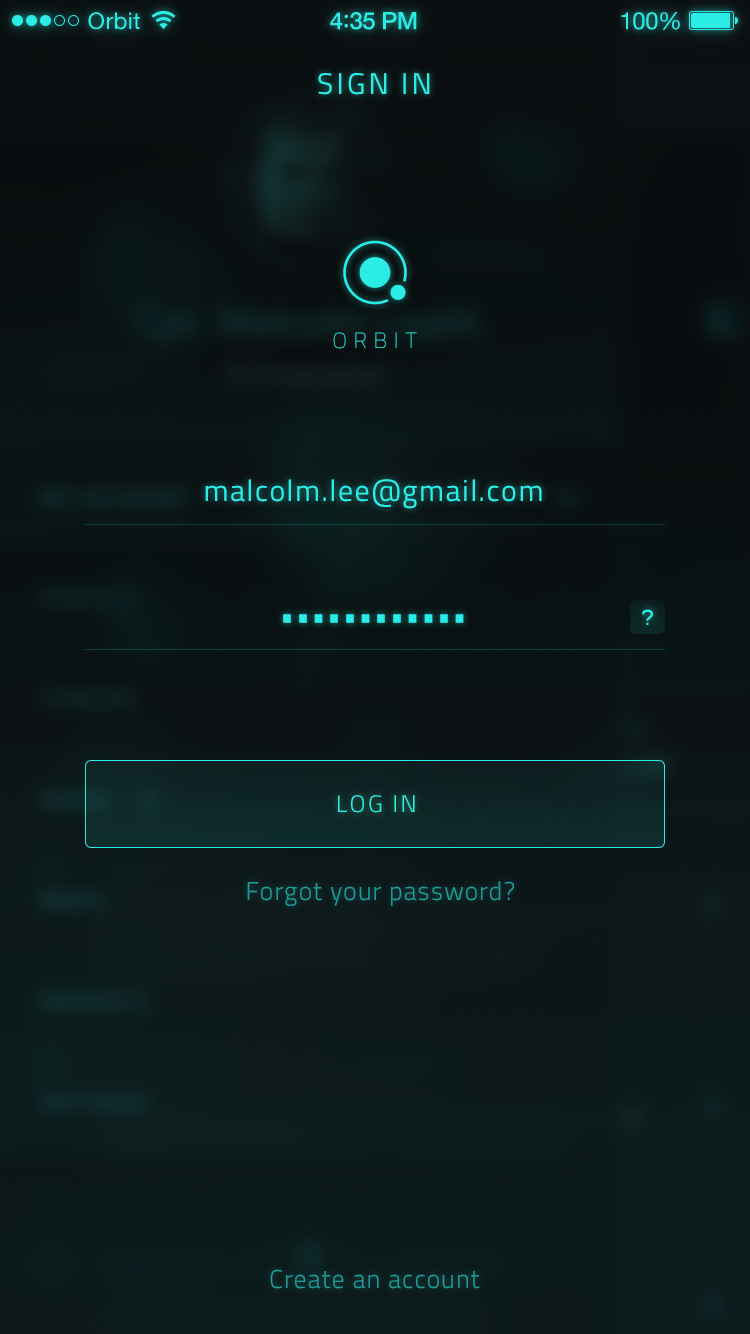
<style>
.page{position:relative;width:750px;height:1334px}
.page>*{position:absolute;margin:0}
.t1{font:23px "HelveticaNeue";letter-spacing:0.02em;color:#2bede6}
.t2{font:24px "HelveticaNeue-Medium";letter-spacing:-0.02em;color:#2bede6}
.t3{font:26px "Avenir-Medium";letter-spacing:-0.02em;color:#2bede6}
.t4{font:24px "HelveticaNeue";letter-spacing:-0.02em;color:#2bede6}
.t5{font:30px "Titillium-Regular";letter-spacing:0.1em;color:#2bede6;text-transform:uppercase}
.t6{font:22px "Titillium-Thin";letter-spacing:0.3em}
.t7{font:30px "Titillium-Regular";letter-spacing:0.05em;color:#2bede6}
.t8{font:26px "ProFontWindows";color:#2bede6;text-transform:uppercase}
.t9{font:24px "Titillium-Light";letter-spacing:0.1em;color:#2bede6;text-transform:uppercase}
.t10{font:26px "Titillium-Light";letter-spacing:0.04em;color:#1e9c97}
.t11{font:26px "Titillium-Light";letter-spacing:0.04em;color:#1d9c98}
</style>
<div class="page">
<p class="t1" style="left:88px;top:12px;width:52px;height:18px">Orbit</p>
<p class="t2" style="left:330px;top:12px;width:87px;height:18px">4<span class="t3">:</span>35 PM</p>
<p class="t4" style="left:621px;top:12px;width:59px;height:18px">100%</p>
<p class="t5" style="left:318px;top:73px;width:112px;height:22px">Sign In</p>
<p class="t6" style="left:333px;top:332px;width:84px;height:17px">ORBIT</p>
<p class="t7" style="left:205px;top:479px;width:337px;height:30px">malcolm.lee@gmail.com</p>
<p class="t7" style="left:283px;top:614px;width:181px;height:9px">••••••••••••</p>
<p class="t8" style="left:642px;top:609px;width:11px;height:16px">?</p>
<p class="t9" style="left:338px;top:795px;width:77px;height:18px">LOG IN</p>
<p class="t10" style="left:247px;top:881px;width:267px;height:25px">Forgot your password?</p>
<p class="t11" style="left:270px;top:1269px;width:210px;height:20px">Create an account</p>
</div>
